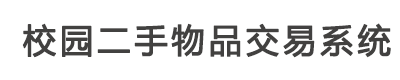
<style>
.page{position:relative;width:400px;height:80px;background:#ffffff}
.page>*{position:absolute;margin:0}
.t1{font:33px "MicrosoftYaHei";letter-spacing:0.1em;color:#424140;font-weight:bold}
</style>
<div class="page">
<p class="t1" style="left:22px;top:23px;width:369px;height:35px">校园二手物品交易系统</p>
</div>
